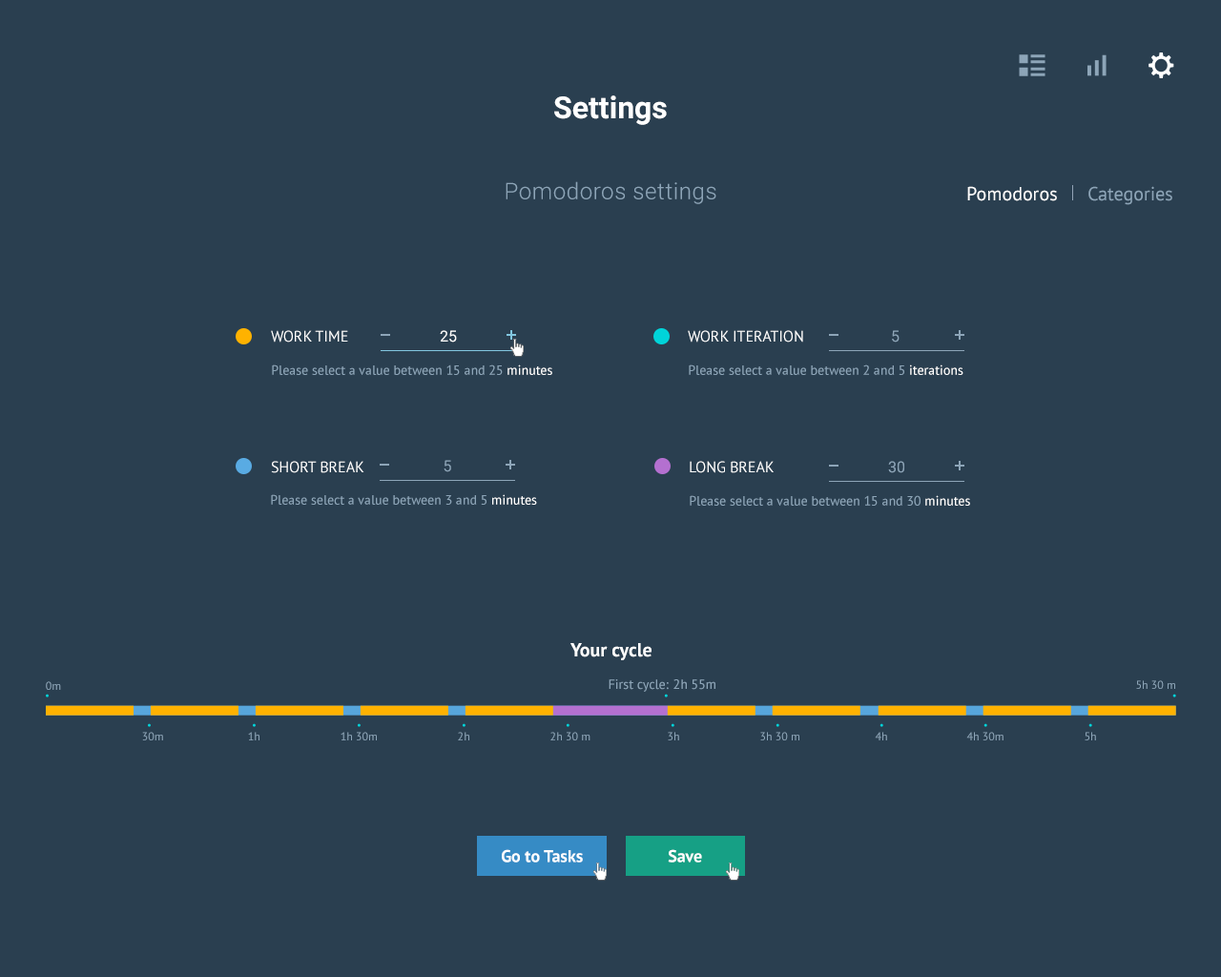
<style>
.page{position:relative;width:1221px;height:977px;background:#2a3f50}
.page>*{position:absolute;margin:0}
.t1{font:30.5px "Roboto-Bold";color:#ffffff}
.t2{font:22.9px "Roboto-Light";letter-spacing:0.025em;color:#8da5b8}
.t3{font:19.1px "PTSans-Regular";color:#ffffff}
.t4{font:19.1px "PTSans-Regular";color:#8da5b8}
.t5{font:15.3px "PTSans-Regular";color:#ffffff;text-transform:uppercase}
.t6{font:15.3px "Roboto-Regular";color:#ffffff}
.t7{font:15.3px "Roboto-Regular";color:#8da5b8}
.t8{font:13.4px "PTSans-Regular";color:#8da5b8}
.t9{font:13.4px "PTSans-Regular";color:#ffffff}
.t10{font:19.1px "PTSans-Bold";color:#ffffff}
.t11{font:11.4px "PTSans-Regular";color:#8da5b8}
.t12{font:17.2px "PTSans-Bold";color:#ffffff}
</style>
<div class="page">
<p class="t1" style="left:554px;top:95px;width:113px;height:30px">Settings</p>
<p class="t2" style="left:506px;top:181px;width:210px;height:23px">Pomodoros settings</p>
<p class="t3" style="left:967px;top:186px;width:90px;height:15px">Pomodoros</p>
<p class="t4" style="left:1088px;top:186px;width:84px;height:19px">Categories</p>
<p class="t5" style="left:271px;top:330px;width:77px;height:12px">Work Time</p>
<p class="t6" style="left:440px;top:330px;width:17px;height:12px">25</p>
<p class="t5" style="left:688px;top:330px;width:115px;height:12px">Work Iteration</p>
<p class="t7" style="left:892px;top:330px;width:7px;height:12px">5</p>
<p class="t8" style="left:272px;top:364px;width:280px;height:11px">Please select a value between 15 and 25 <span class="t9">minutes</span></p>
<p class="t8" style="left:689px;top:364px;width:274px;height:11px">Please select a value between 2 and 5 <span class="t9">iterations</span></p>
<p class="t5" style="left:271px;top:461px;width:93px;height:12px">Short Break</p>
<p class="t7" style="left:444px;top:460px;width:7px;height:12px">5</p>
<p class="t5" style="left:690px;top:461px;width:84px;height:12px">Long Break</p>
<p class="t7" style="left:888px;top:461px;width:16px;height:12px">30</p>
<p class="t8" style="left:271px;top:494px;width:266px;height:11px">Please select a value between 3 and 5 <span class="t9">minutes</span></p>
<p class="t8" style="left:690px;top:495px;width:280px;height:11px">Please select a value between 15 and 30 <span class="t9">minutes</span></p>
<p class="t10" style="left:570px;top:643px;width:81px;height:17px">Your cycle</p>
<p class="t11" style="left:46px;top:681px;width:15px;height:9px">0m</p>
<p class="t8" style="left:609px;top:679px;width:60px;height:13px">First cycle:</p>
<p class="t8" style="left:673px;top:679px;width:42px;height:11px">2h 55m</p>
<p class="t11" style="left:1136px;top:680px;width:39px;height:9px">5h 30 m</p>
<p class="t11" style="left:142px;top:732px;width:21px;height:8px">30m</p>
<p class="t11" style="left:248px;top:732px;width:11px;height:8px">1h</p>
<p class="t11" style="left:341px;top:732px;width:36px;height:8px">1h 30m</p>
<p class="t11" style="left:458px;top:732px;width:11px;height:8px">2h</p>
<p class="t11" style="left:550px;top:732px;width:40px;height:8px">2h 30 m</p>
<p class="t11" style="left:668px;top:732px;width:11px;height:8px">3h</p>
<p class="t11" style="left:760px;top:732px;width:39px;height:8px">3h 30 m</p>
<p class="t11" style="left:875px;top:732px;width:12px;height:8px">4h</p>
<p class="t11" style="left:966px;top:732px;width:37px;height:8px">4h 30m</p>
<p class="t11" style="left:1084px;top:732px;width:12px;height:8px">5h</p>
<p class="t12" style="left:502px;top:849px;width:81px;height:13px">Go to Tasks</p>
<p class="t12" style="left:668px;top:849px;width:34px;height:13px">Save</p>
</div>
